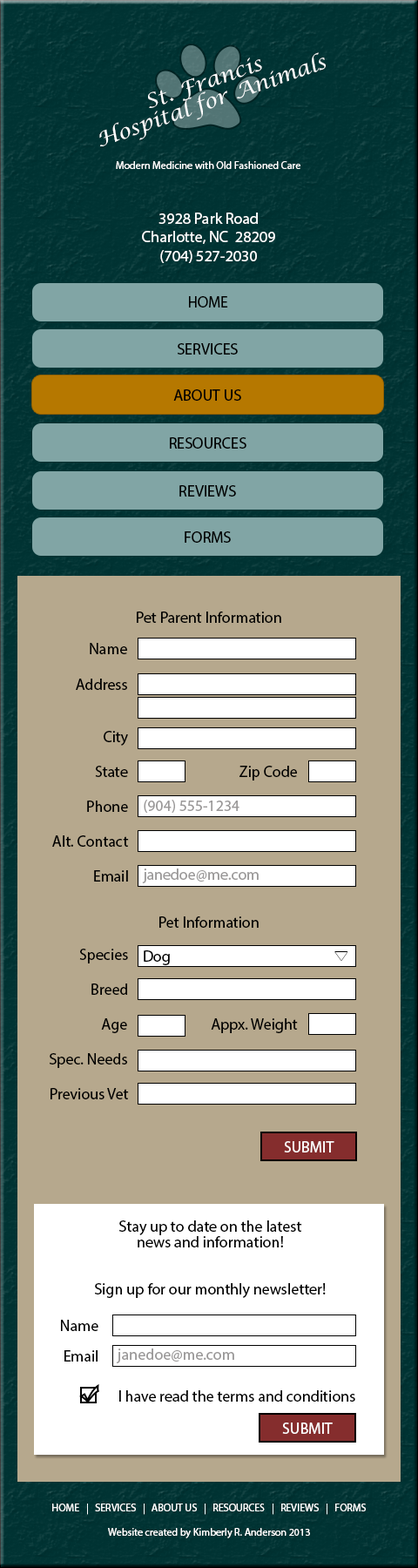
<style>
.page{position:relative;width:418px;height:1568px;background:#b6a88d}
.page>*{position:absolute;margin:0}
.t1{font:20px/20px "LucidaCalligraphy-Italic";color:#ffffff;scale:1.07 1}
.t2{font:10.5px "MyriadPro-Regular";color:#ffffff}
.t3{font:15.7px "MyriadPro-Regular";color:#ffffff}
.t4{font:15.7px "MyriadPro-Regular";color:#000000}
.t5{font:15.7px "MyriadPro-Regular";color:#9b9999}
.t6{font:15.7px/15.7px "MyriadPro-Regular";color:#000000}
</style>
<div class="page">
<p class="t1" style="left:99px;top:52px;width:227px;height:94px;text-align:center;rotate:-19deg">St. Francis<br>Hospital for Animals</p>
<p class="t2" style="left:116px;top:161px;width:185px;height:8px">Modern Medicine with Old Fashioned Care</p>
<p class="t3" style="left:142px;top:213px;width:133px;height:50px;text-align:center">3928 Park Road<br>Charlotte, NC  28209<br>(704) 527-2030</p>
<p class="t4" style="left:189px;top:296px;width:39px;height:12px">HOME</p>
<p class="t4" style="left:178px;top:343px;width:60px;height:12px">SERVICES</p>
<p class="t4" style="left:173px;top:389px;width:68px;height:12px">ABOUT US</p>
<p class="t4" style="left:170px;top:437px;width:77px;height:12px">RESOURCES</p>
<p class="t4" style="left:179px;top:485px;width:57px;height:12px">REVIEWS</p>
<p class="t4" style="left:185px;top:531px;width:46px;height:12px">FORMS</p>
<p class="t4" style="left:137px;top:612px;width:144px;height:11px">Pet Parent Information</p>
<p class="t4" style="left:90px;top:643px;width:37px;height:11px">Name</p>
<p class="t4" style="left:76px;top:679px;width:51px;height:11px">Address</p>
<p class="t4" style="left:104px;top:731px;width:24px;height:15px">City</p>
<p class="t4" style="left:95px;top:766px;width:33px;height:11px">State</p>
<p class="t4" style="left:240px;top:766px;width:57px;height:15px">Zip Code</p>
<p class="t4" style="left:87px;top:801px;width:41px;height:11px">Phone</p>
<p class="t5" style="left:144px;top:800px;width:96px;height:13px">(904) 555-1234</p>
<p class="t4" style="left:52px;top:835px;width:77px;height:12px">Alt. Contact</p>
<p class="t5" style="left:142px;top:868px;width:117px;height:15px">janedoe@me.com</p>
<p class="t4" style="left:94px;top:870px;width:34px;height:12px">Email</p>
<p class="t4" style="left:159px;top:916px;width:100px;height:12px">Pet Information</p>
<p class="t4" style="left:79px;top:949px;width:49px;height:14px">Species</p>
<p class="t4" style="left:144px;top:950px;width:26px;height:15px">Dog</p>
<p class="t4" style="left:91px;top:983px;width:36px;height:12px">Breed</p>
<p class="t4" style="left:101px;top:1018px;width:26px;height:15px">Age</p>
<p class="t4" style="left:211px;top:1018px;width:87px;height:15px">Appx. Weight</p>
<p class="t4" style="left:50px;top:1053px;width:77px;height:15px">Spec. Needs</p>
<p class="t4" style="left:51px;top:1088px;width:78px;height:11px">Previous Vet</p>
<p class="t3" style="left:284px;top:1141px;width:51px;height:11px">SUBMIT</p>
<p class="t6" style="left:95px;top:1220px;width:231px;height:78px;text-align:center">Stay up to date on the latest<br>news and information!<br><br><br>Sign up for our monthly newsletter!</p>
<p class="t4" style="left:61px;top:1320px;width:37px;height:11px">Name</p>
<p class="t5" style="left:116px;top:1348px;width:118px;height:15px">janedoe@me.com</p>
<p class="t4" style="left:64px;top:1350px;width:34px;height:12px">Email</p>
<p class="t4" style="left:119px;top:1390px;width:236px;height:12px">I have read the terms and conditions</p>
<p class="t3" style="left:282px;top:1423px;width:51px;height:11px">SUBMIT</p>
<p class="t2" style="left:52px;top:1504px;width:314px;height:11px">HOME   |   SERVICES   |   ABOUT US   |   RESOURCES   |   REVIEWS   |   FORMS</p>
<p class="t2" style="left:108px;top:1528px;width:202px;height:10px">Website created by Kimberly R. Anderson 2013</p>
</div>
